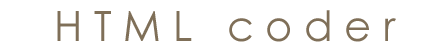
<style>
.page{position:relative;width:448px;height:55px;background:#ffffff}
.page>*{position:absolute;margin:0}
.t1{font:41.7px "CenturyGothic";color:#7f6f58}
</style>
<div class="page">
<p class="t1" style="left:57px;top:10px;width:339px;height:32px">H T M L   c o d e r</p>
</div>
